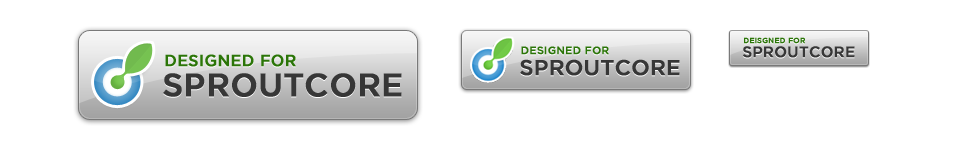
<style>
.page{position:relative;width:960px;height:150px;background:#ffffff}
.page>*{position:absolute;margin:0}
.t1{font:7.5px "GothamMedium";color:#2b7508;font-weight:bold}
.t2{font:16px "GothamMedium";color:#2b7508;font-weight:bold}
.t3{font:10.7px "GothamMedium";color:#2b7508;font-weight:bold}
.t4{font:15px "GothamMedium";color:#373737;font-weight:bold}
.t5{font:21.4px "GothamMedium";color:#373737;font-weight:bold}
.t6{font:32px "GothamMedium";color:#373737;font-weight:bold}
</style>
<div class="page">
<p class="t1" style="left:744px;top:37px;width:61px;height:7px">DEISGNED FOR</p>
<p class="t2" style="left:165px;top:54px;width:131px;height:13px">DESIGNED FOR</p>
<p class="t3" style="left:521px;top:46px;width:88px;height:9px">DESIGNED FOR</p>
<p class="t4" style="left:743px;top:46px;width:112px;height:12px">SPROUTCORE</p>
<p class="t5" style="left:520px;top:59px;width:160px;height:17px">SPROUTCORE</p>
<p class="t6" style="left:163px;top:73px;width:239px;height:24px">SPROUTCORE</p>
</div>
